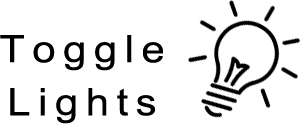
<style>
.page{position:relative;width:300px;height:124px;background:#ffffff}
.page>*{position:absolute;margin:0}
.t1{font:37.7px/53px "ArialMT";letter-spacing:0.18em;color:#000000;scale:1.11 1}
</style>
<div class="page">
<p class="t1" style="left:0px;top:35px;width:163px;height:89px;text-align:center">Toggle<br>Lights</p>
</div>
